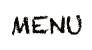
<style>
.page{position:relative;width:92px;height:50px;background:#ffffff}
.page>*{position:absolute;margin:0}
.t1{font:24px "Chalkduster";color:#060300}
</style>
<div class="page">
<p class="t1" style="left:12px;top:15px;width:70px;height:21px">MENU</p>
</div>
